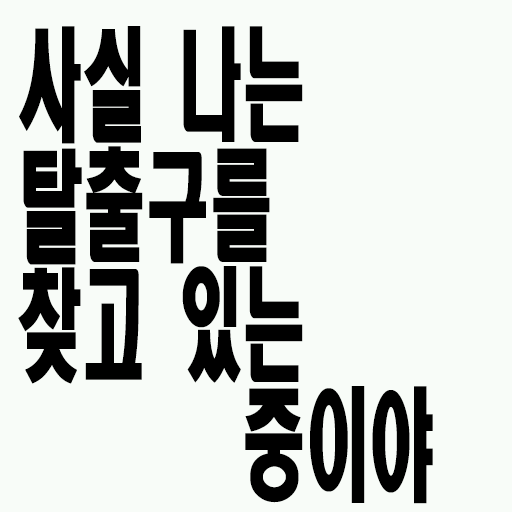
<style>
.page{position:relative;width:512px;height:512px;background:#f8fcf8}
.page>*{position:absolute;margin:0}
.t1{font:121.6px/120px "HeadlineR-HM";color:#000000;scale:0.53 1}
</style>
<div class="page">
<p class="t1" style="left:18px;top:26px;width:415px;height:478px">사실 나는<br>탈출구를<br>찾고 있는<br>       중이야</p>
</div>
